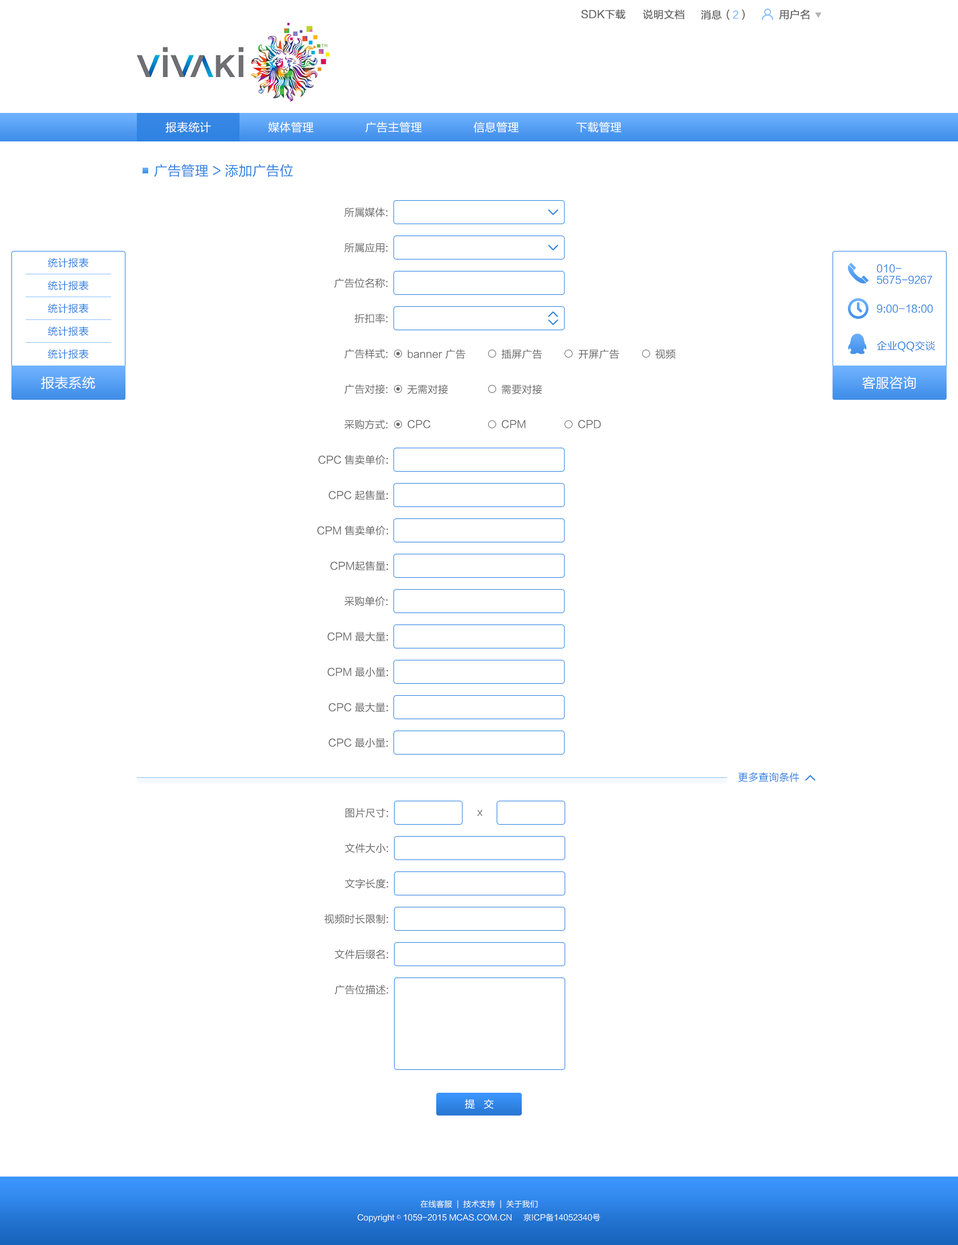
<style>
.page{position:relative;width:958px;height:1245px;background:#ffffff}
.page>*{position:absolute;margin:0}
.t1{font:10.3px "FZLTHJW--GB1-0";color:#666666;font-weight:bold}
.t2{font:10.3px "FZLTHJW--GB1-0";color:#8bc1ff;font-weight:bold}
.t3{font:11.4px "FZLTHJW--GB1-0";color:#ffffff}
.t4{font:13.7px "FZLTHJW--GB1-0";color:#2b7fe0}
.t5{font:10.3px "FZLTHJW--GB1-0";color:#666666}
.t6{font:10.3px "FZLTHJW--GB1-0";color:#2b7fe0}
.t7{font:10.3px/11.4px "FZLTHJW--GB1-0";color:#2b7fe0}
.t8{font:13.7px "FZLTHJW--GB1-0";color:#ffffff}
.t9{font:10.3px "FZLTHJW--GB1-0";color:#ffffff}
.t10{font:8px "FZLTHJW--GB1-0";color:#ffffff}
.t11{font:8px "SimSun";color:#ffffff}
</style>
<div class="page">
<p class="t1" style="left:581px;top:9px;width:45px;height:10px">SDK下载</p>
<p class="t1" style="left:643px;top:9px;width:42px;height:10px">说明文档</p>
<p class="t1" style="left:701px;top:9px;width:44px;height:11px">消息（<span class="t2">2</span>）</p>
<p class="t1" style="left:779px;top:9px;width:31px;height:10px">用户名</p>
<p class="t3" style="left:165px;top:121px;width:46px;height:12px">报表统计</p>
<p class="t3" style="left:268px;top:121px;width:46px;height:12px">媒体管理</p>
<p class="t3" style="left:365px;top:121px;width:57px;height:12px">广告主管理</p>
<p class="t3" style="left:473px;top:121px;width:46px;height:12px">信息管理</p>
<p class="t3" style="left:576px;top:121px;width:46px;height:12px">下载管理</p>
<p class="t4" style="left:154px;top:164px;width:139px;height:13px">广告管理 &gt; 添加广告位</p>
<p class="t5" style="left:344px;top:207px;width:44px;height:10px">所属媒体:</p>
<p class="t5" style="left:344px;top:242px;width:44px;height:11px">所属应用:</p>
<p class="t6" style="left:48px;top:258px;width:40px;height:9px">统计报表</p>
<p class="t7" style="left:876px;top:264px;width:56px;height:20px">010-<br>5675-9267</p>
<p class="t6" style="left:48px;top:281px;width:40px;height:9px">统计报表</p>
<p class="t5" style="left:334px;top:278px;width:54px;height:10px">广告位名称:</p>
<p class="t6" style="left:48px;top:303px;width:40px;height:10px">统计报表</p>
<p class="t6" style="left:876px;top:304px;width:57px;height:9px">9:00-18:00</p>
<p class="t5" style="left:355px;top:313px;width:33px;height:10px">折扣率:</p>
<p class="t6" style="left:48px;top:326px;width:40px;height:10px">统计报表</p>
<p class="t6" style="left:877px;top:340px;width:58px;height:12px">企业QQ交谈</p>
<p class="t6" style="left:48px;top:349px;width:40px;height:10px">统计报表</p>
<p class="t5" style="left:344px;top:348px;width:44px;height:11px">广告样式:</p>
<p class="t5" style="left:408px;top:349px;width:57px;height:10px">banner 广告</p>
<p class="t5" style="left:501px;top:349px;width:41px;height:10px">插屏广告</p>
<p class="t5" style="left:578px;top:349px;width:41px;height:10px">开屏广告</p>
<p class="t5" style="left:655px;top:349px;width:21px;height:10px">视频</p>
<p class="t8" style="left:41px;top:376px;width:54px;height:13px">报表系统</p>
<p class="t8" style="left:862px;top:376px;width:54px;height:13px">客服咨询</p>
<p class="t5" style="left:344px;top:384px;width:44px;height:10px">广告对接:</p>
<p class="t5" style="left:407px;top:384px;width:41px;height:10px">无需对接</p>
<p class="t5" style="left:501px;top:384px;width:41px;height:11px">需要对接</p>
<p class="t5" style="left:344px;top:419px;width:44px;height:10px">采购方式:</p>
<p class="t5" style="left:408px;top:420px;width:23px;height:8px">CPC</p>
<p class="t5" style="left:502px;top:420px;width:24px;height:8px">CPM</p>
<p class="t5" style="left:578px;top:420px;width:23px;height:8px">CPD</p>
<p class="t5" style="left:318px;top:454px;width:70px;height:11px">CPC 售卖单价:</p>
<p class="t5" style="left:328px;top:490px;width:60px;height:10px">CPC 起售量:</p>
<p class="t5" style="left:317px;top:525px;width:71px;height:10px">CPM 售卖单价:</p>
<p class="t5" style="left:330px;top:561px;width:58px;height:10px">CPM起售量:</p>
<p class="t5" style="left:344px;top:596px;width:44px;height:10px">采购单价:</p>
<p class="t5" style="left:327px;top:632px;width:61px;height:9px">CPM 最大量:</p>
<p class="t5" style="left:327px;top:667px;width:61px;height:10px">CPM 最小量:</p>
<p class="t5" style="left:328px;top:702px;width:60px;height:10px">CPC 最大量:</p>
<p class="t5" style="left:328px;top:738px;width:60px;height:10px">CPC 最小量:</p>
<p class="t6" style="left:738px;top:772px;width:61px;height:10px">更多查询条件</p>
<p class="t5" style="left:346px;top:807px;width:42px;height:11px">图片尺寸:</p>
<p class="t5" style="left:477px;top:810px;width:5px;height:6px">x</p>
<p class="t5" style="left:345px;top:843px;width:43px;height:10px">文件大小:</p>
<p class="t5" style="left:345px;top:878px;width:43px;height:10px">文字长度:</p>
<p class="t5" style="left:324px;top:913px;width:64px;height:11px">视频时长限制:</p>
<p class="t5" style="left:335px;top:949px;width:53px;height:10px">文件后缀名:</p>
<p class="t5" style="left:335px;top:984px;width:53px;height:10px">广告位描述:</p>
<p class="t9" style="left:465px;top:1099px;width:29px;height:9px">提   交</p>
<p class="t10" style="left:420px;top:1200px;width:118px;height:8px">在线客服  |  技术支持  |  关于我们</p>
<p class="t10" style="left:358px;top:1213px;width:242px;height:9px">Copyright <span class="t11">©</span> 1059-2015 MCAS.COM.CN     京ICP备14052340号</p>
</div>
